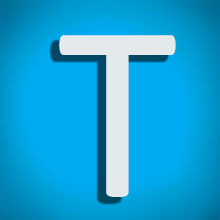
<style>
.page{position:relative;width:220px;height:220px;background:#00abf2}
.page>*{position:absolute;margin:0}
.t1{font:252.1px "Calibri";color:#ececec;font-weight:bold;scale:0.96 1}
</style>
<div class="page">
<p class="t1" style="left:59px;top:35px;width:117px;height:162px">T</p>
</div>
